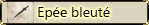
<style>
.page{position:relative;width:149px;height:25px;background:#d9d5bd}
.page>*{position:absolute;margin:0}
.t1{font:14px "LaoUI";color:#000000}
</style>
<div class="page">
<p class="t1" style="left:38px;top:7px;width:72px;height:13px">Epée bleuté</p>
</div>
